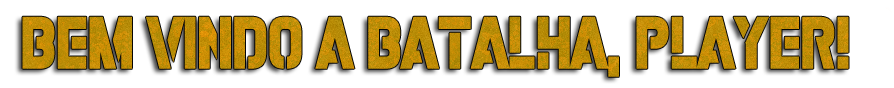
<style>
.page{position:relative;width:894px;height:88px;background:#ffffff}
.page>*{position:absolute;margin:0}
.t1{font:81.4px "ArmyBuster";color:#bf8d07;scale:0.89 1}
</style>
<div class="page">
<p class="t1" style="left:22px;top:16px;width:827px;height:61px">Bem vindo a batalha, PLAYER!</p>
</div>
